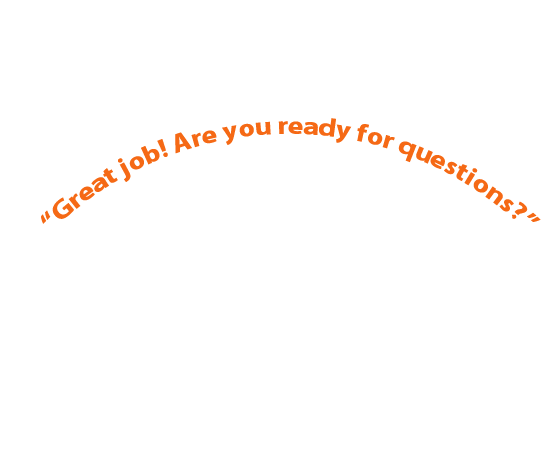
<style>
.page{position:relative;width:543px;height:456px;background:#ffffff}
.page>*{position:absolute;margin:0}
.t1{font:25.1px "MyriadPro-Bold";letter-spacing:0.01em;color:#f56915}
</style>
<div class="page">
<p class="t1" style="left:41px;top:118px;width:500px;height:106px">“Great job! Are you ready for questions?”</p>
</div>
